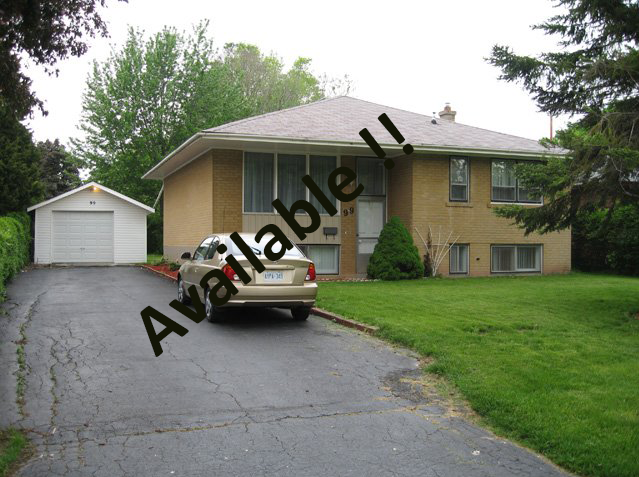
<style>
.page{position:relative;width:639px;height:477px}
.page>*{position:absolute;margin:0}
.t1{font:72px "Calibri-Bold";color:#131506}
</style>
<div class="page">
<p class="t1" style="left:140px;top:113px;width:274px;height:244px;rotate:-39deg">Available !!</p>
</div>
